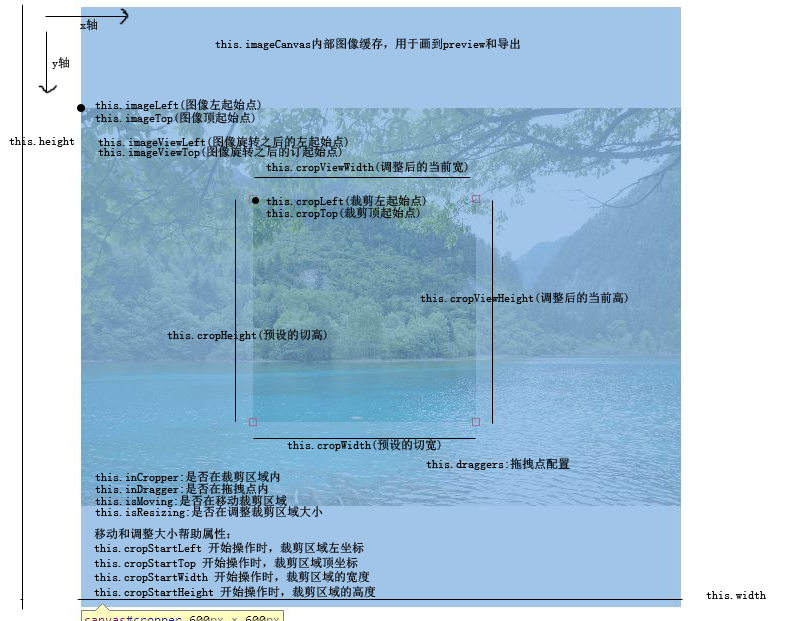
<style>
.page{position:relative;width:800px;height:621px;background:#ffffff}
.page>*{position:absolute;margin:0}
.t1{font:12px "SimSun";color:#000000}
</style>
<div class="page">
<p class="t1" style="left:80px;top:19px;width:18px;height:12px">x轴</p>
<p class="t1" style="left:215px;top:38px;width:305px;height:12px">this.imageCanvas内部图像缓存，用于画到preview和导出</p>
<p class="t1" style="left:52px;top:57px;width:18px;height:12px">y轴</p>
<p class="t1" style="left:95px;top:99px;width:166px;height:12px">this.imageLeft(图像左起始点)</p>
<p class="t1" style="left:95px;top:112px;width:160px;height:12px">this.imageTop(图像顶起始点)</p>
<p class="t1" style="left:9px;top:137px;width:66px;height:10px">this.height</p>
<p class="t1" style="left:98px;top:136px;width:250px;height:12px">this.imageViewLeft(图像旋转之后的左起始点)</p>
<p class="t1" style="left:98px;top:146px;width:244px;height:12px">this.imageViewTop(图像旋转之后的订起始点)</p>
<p class="t1" style="left:266px;top:161px;width:202px;height:12px">this.cropViewWidth(调整后的当前宽)</p>
<p class="t1" style="left:266px;top:195px;width:160px;height:12px">this.cropLeft(裁剪左起始点)</p>
<p class="t1" style="left:266px;top:207px;width:154px;height:12px">this.cropTop(裁剪顶起始点)</p>
<p class="t1" style="left:420px;top:292px;width:208px;height:12px">this.cropViewHeight(调整后的当前高)</p>
<p class="t1" style="left:167px;top:329px;width:160px;height:12px">this.cropHeight(预设的切高)</p>
<p class="t1" style="left:287px;top:439px;width:154px;height:12px">this.cropWidth(预设的切宽)</p>
<p class="t1" style="left:426px;top:458px;width:144px;height:12px">this.draggers:拖拽点配置</p>
<p class="t1" style="left:95px;top:471px;width:185px;height:12px">this.inCropper:是否在裁剪区域内</p>
<p class="t1" style="left:95px;top:483px;width:173px;height:12px">this.inDragger:是否在拖拽点内</p>
<p class="t1" style="left:95px;top:495px;width:192px;height:12px">this.isMoving:是否在移动裁剪区域</p>
<p class="t1" style="left:95px;top:506px;width:228px;height:12px">this.isResizing:是否在调整裁剪区域大小</p>
<p class="t1" style="left:94px;top:528px;width:282px;height:70px">移动和调整大小帮助属性：<br>this.cropStartLeft 开始操作时，裁剪区域左坐标<br>this.cropStartTop 开始操作时，裁剪区域顶坐标<br>this.cropStartWidth 开始操作时，裁剪区域的宽度<br>this.cropStartHeight 开始操作时，裁剪区域的高度</p>
<p class="t1" style="left:706px;top:591px;width:60px;height:8px">this.width</p>
</div>
